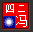
<style>
.page{position:relative;width:33px;height:32px;background:#f20000}
.page>*{position:absolute;margin:0}
.t1{font:10.4px "SimSun";color:#ffffff}
.t2{font:11.7px "SimSun";color:#ffffff}
</style>
<div class="page">
<p class="t1" style="left:6px;top:4px;width:19px;height:9px">四二</p>
<p class="t2" style="left:16px;top:15px;width:11px;height:12px">冯</p>
</div>
